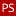
<style>
.page{position:relative;width:16px;height:16px;background:#b10001}
.page>*{position:absolute;margin:0}
.t1{font:11.5px "OpenSans";color:#ffffff}
</style>
<div class="page">
<p class="t1" style="left:2px;top:3px;width:12px;height:9px">PS</p>
</div>
